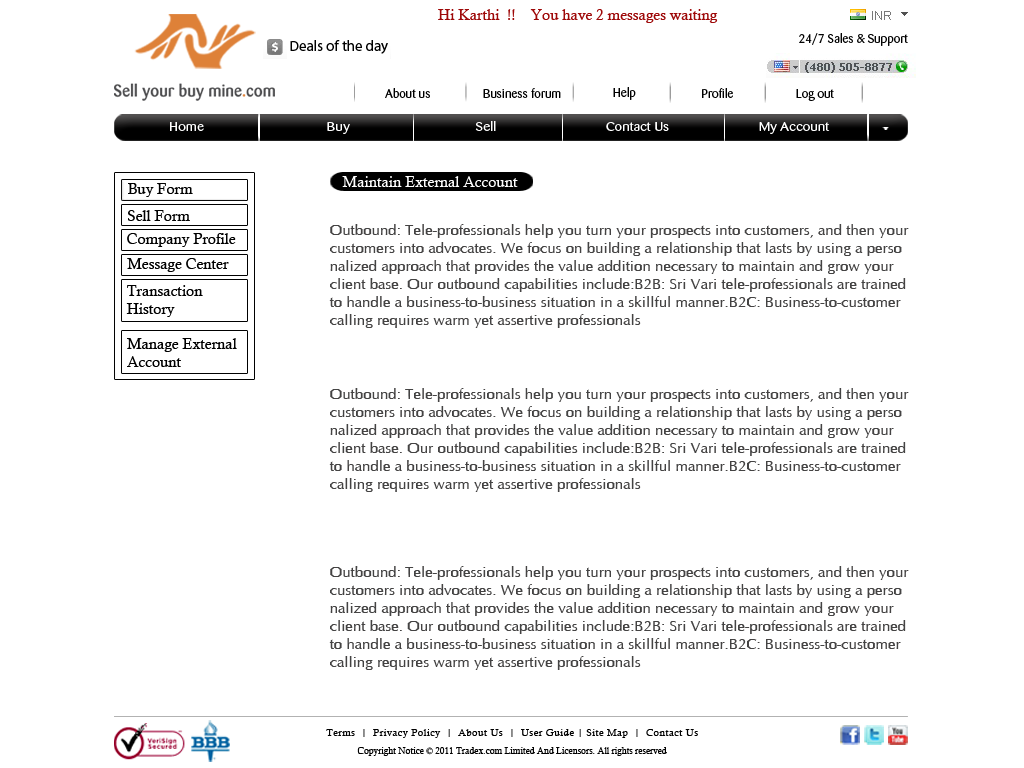
<style>
.page{position:relative;width:1024px;height:768px;background:#ffffff}
.page>*{position:absolute;margin:0}
.t1{font:15px "CalistoMT";color:#9e0909}
.t2{font:14.9px "MyriadPro-Regular";color:#000000}
.t3{font:12px "Barmeno-Regular";color:#030303;scale:1.05 1}
.t4{font:12px "Barmeno-Regular";color:#000000;scale:1.05 1}
.t5{font:12.1px "Barmeno-Regular";color:#ffffff;scale:1.2 1}
.t6{font:15px "CalistoMT";color:#000000}
.t7{font:15px "CalistoMT";color:#ffffff}
.t8{font:15px "CGOmega";letter-spacing:0.005em;color:#444343}
.t9{font:10px/18px "CalistoMT";letter-spacing:0.045em;color:#000000}
.t10{font:9px/18px "CalistoMT";color:#000000}
</style>
<div class="page">
<p class="t1" style="left:438px;top:9px;width:280px;height:14px">Hi Karthi  !!    You have 2 messages waiting</p>
<p class="t2" style="left:290px;top:40px;width:98px;height:14px">Deals of the day</p>
<p class="t3" style="left:799px;top:33px;width:109px;height:13px">24/7 Sales &amp; Support</p>
<p class="t4" style="left:385px;top:88px;width:45px;height:10px">About us</p>
<p class="t4" style="left:483px;top:88px;width:78px;height:10px">Business forum</p>
<p class="t4" style="left:613px;top:87px;width:23px;height:13px">Help</p>
<p class="t4" style="left:702px;top:88px;width:31px;height:10px">Profile</p>
<p class="t4" style="left:796px;top:89px;width:38px;height:12px">Log out</p>
<p class="t5" style="left:170px;top:121px;width:660px;height:13px">Home                                     Buy                                      Sell                                 Contact Us                           My Account</p>
<p class="t6" style="left:128px;top:183px;width:65px;height:14px">Buy Form</p>
<p class="t7" style="left:342px;top:176px;width:176px;height:11px">Maintain External Account</p>
<p class="t6" style="left:128px;top:210px;width:62px;height:11px">Sell Form</p>
<p class="t6" style="left:127px;top:233px;width:109px;height:14px">Company Profile</p>
<p class="t8" style="left:329px;top:224px;width:580px;height:104px">Outbound: Tele-professionals help you turn your prospects into customers, and then your<br>customers into advocates. We focus on building a relationship that lasts by using a perso<br>nalized approach that provides the value addition necessary to maintain and grow your <br>client base. Our outbound capabilities include:B2B: Sri Vari tele-professionals are trained<br>to handle a business-to-business situation in a skillful manner.B2C: Business-to-customer<br>calling requires warm yet assertive professionals</p>
<p class="t6" style="left:127px;top:258px;width:102px;height:14px">Message Center</p>
<p class="t6" style="left:126px;top:285px;width:77px;height:32px">Transaction<br>History</p>
<p class="t6" style="left:127px;top:338px;width:110px;height:29px">Manage External<br>Account</p>
<p class="t8" style="left:329px;top:388px;width:580px;height:104px">Outbound: Tele-professionals help you turn your prospects into customers, and then your<br>customers into advocates. We focus on building a relationship that lasts by using a perso<br>nalized approach that provides the value addition necessary to maintain and grow your <br>client base. Our outbound capabilities include:B2B: Sri Vari tele-professionals are trained<br>to handle a business-to-business situation in a skillful manner.B2C: Business-to-customer<br>calling requires warm yet assertive professionals</p>
<p class="t8" style="left:329px;top:566px;width:580px;height:104px">Outbound: Tele-professionals help you turn your prospects into customers, and then your<br>customers into advocates. We focus on building a relationship that lasts by using a perso<br>nalized approach that provides the value addition necessary to maintain and grow your <br>client base. Our outbound capabilities include:B2B: Sri Vari tele-professionals are trained<br>to handle a business-to-business situation in a skillful manner.B2C: Business-to-customer<br>calling requires warm yet assertive professionals</p>
<p class="t9" style="left:326px;top:729px;width:372px;height:27px;text-align:center">Terms  |  Privacy Policy  |  About Us  |  User Guide | Site Map  |  Contact Us<br><span class="t10">Copyright Notice © 2011 Tradex.com Limited And Licensors. All rights reserved</span></p>
</div>
